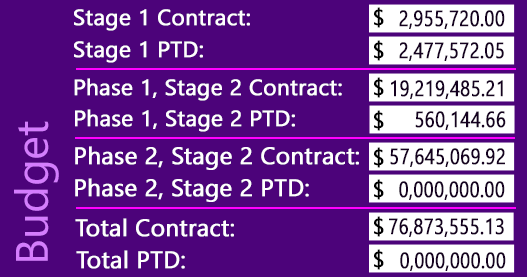
<style>
.page{position:relative;width:527px;height:277px;background:#4c037a}
.page>*{position:absolute;margin:0}
.t1{font:22.2px "Gadugi";color:#ffffff;font-weight:bold}
.t2{font:22.2px "Gadugi";color:#010101;font-weight:bold}
.t3{font:22.2px "Gadugi";color:#150120;font-weight:bold;scale:0.82 1}
.t4{font:22.2px "Gadugi";color:#000000;font-weight:bold}
.t5{font:45.6px "Gadugi";color:#d47dfd}
.t6{font:23.7px "Gadugi";color:#ffffff;font-weight:bold}
.t7{font:22.2px "Gadugi";color:#010001;font-weight:bold}
</style>
<div class="page">
<p class="t1" style="left:74px;top:9px;width:176px;height:22px">Stage 1 Contract:</p>
<p class="t2" style="left:374px;top:7px;width:10px;height:21px">$</p>
<p class="t3" style="left:399px;top:10px;width:106px;height:19px">2,955,720.00</p>
<p class="t1" style="left:74px;top:41px;width:129px;height:22px">Stage 1 PTD:</p>
<p class="t4" style="left:374px;top:40px;width:10px;height:21px">$</p>
<p class="t3" style="left:399px;top:42px;width:105px;height:19px">2,477,572.05</p>
<p class="t1" style="left:74px;top:78px;width:268px;height:23px">Phase 1, Stage 2 Contract:</p>
<p class="t4" style="left:374px;top:77px;width:10px;height:21px">$</p>
<p class="t3" style="left:391px;top:80px;width:112px;height:19px">19,219,485.21</p>
<p class="t1" style="left:75px;top:109px;width:220px;height:23px">Phase 1, Stage 2 PTD:</p>
<p class="t2" style="left:374px;top:110px;width:10px;height:21px">$</p>
<p class="t3" style="left:415px;top:111px;width:91px;height:19px">560,144.66</p>
<p class="t5" style="left:14px;top:121px;width:45px;height:140px;rotate:-90deg">Budget</p>
<p class="t6" style="left:75px;top:146px;width:284px;height:24px">Phase 2, Stage 2 Contract:</p>
<p class="t4" style="left:374px;top:147px;width:10px;height:21px">$</p>
<p class="t3" style="left:390px;top:148px;width:115px;height:19px">57,645,069.92</p>
<p class="t6" style="left:75px;top:178px;width:234px;height:24px">Phase 2, Stage 2 PTD:</p>
<p class="t4" style="left:374px;top:179px;width:10px;height:21px">$</p>
<p class="t3" style="left:399px;top:181px;width:106px;height:19px">0,000,000.00</p>
<p class="t6" style="left:75px;top:218px;width:159px;height:19px">Total Contract:</p>
<p class="t7" style="left:374px;top:216px;width:10px;height:21px">$</p>
<p class="t3" style="left:389px;top:218px;width:115px;height:19px">76,873,555.13</p>
<p class="t6" style="left:76px;top:250px;width:109px;height:19px">Total PTD:</p>
<p class="t2" style="left:374px;top:249px;width:10px;height:21px">$</p>
<p class="t3" style="left:400px;top:252px;width:106px;height:19px">0,000,000.00</p>
</div>
